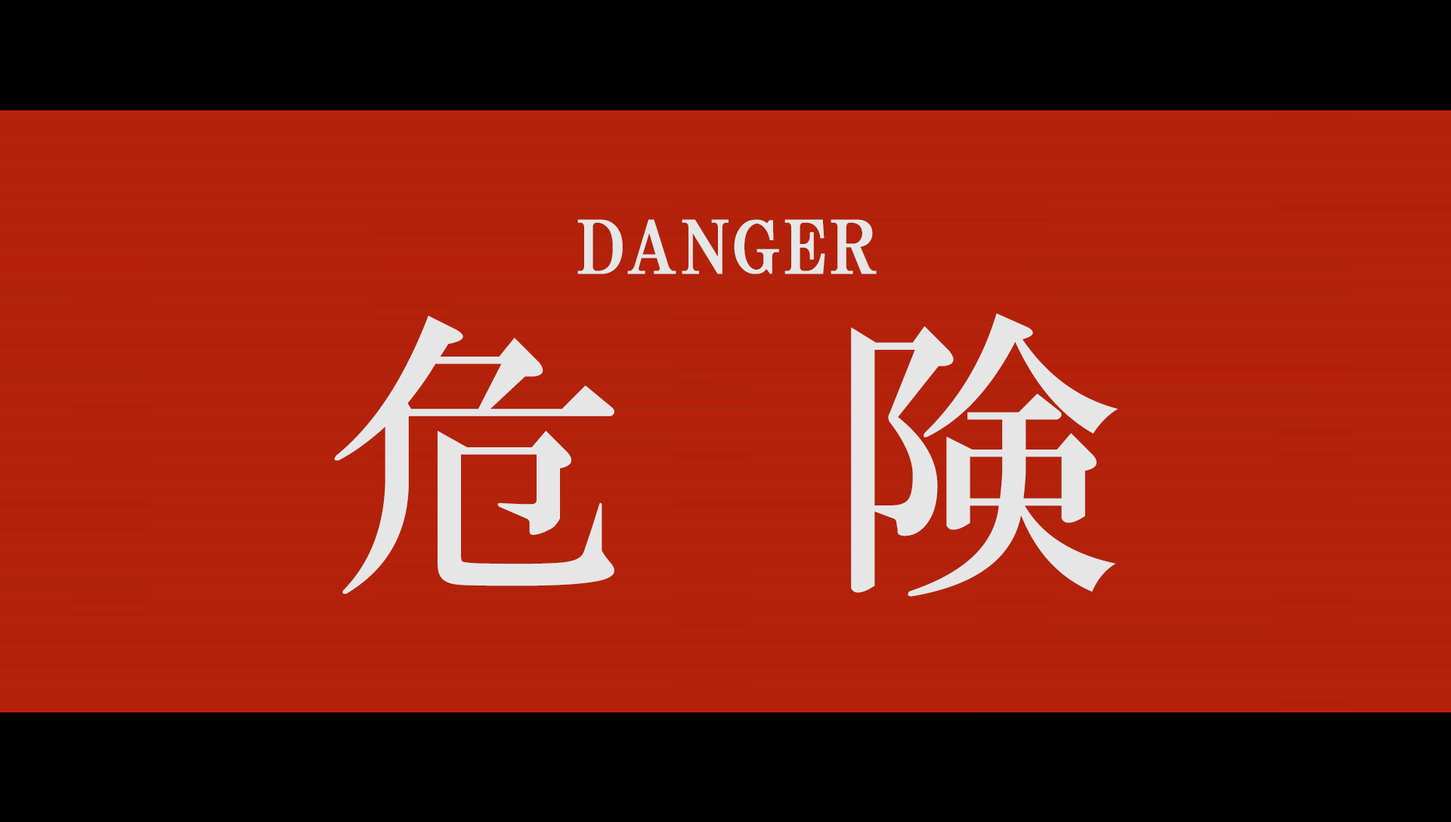
<style>
.page{position:relative;width:1451px;height:822px;background:#000000}
.page>*{position:absolute;margin:0}
.t1{font:72.5px "HGPMinchoB";letter-spacing:0.01em;color:#e6e6e6;text-transform:uppercase;font-weight:bold}
.t2{font:297.7px "HGMinchoB";letter-spacing:0.67em;color:#e6e6e6}
</style>
<div class="page">
<p class="t1" style="left:577px;top:219px;width:299px;height:55px">Danger</p>
<p class="t2" style="left:334px;top:314px;width:783px;height:283px">危険</p>
</div>
